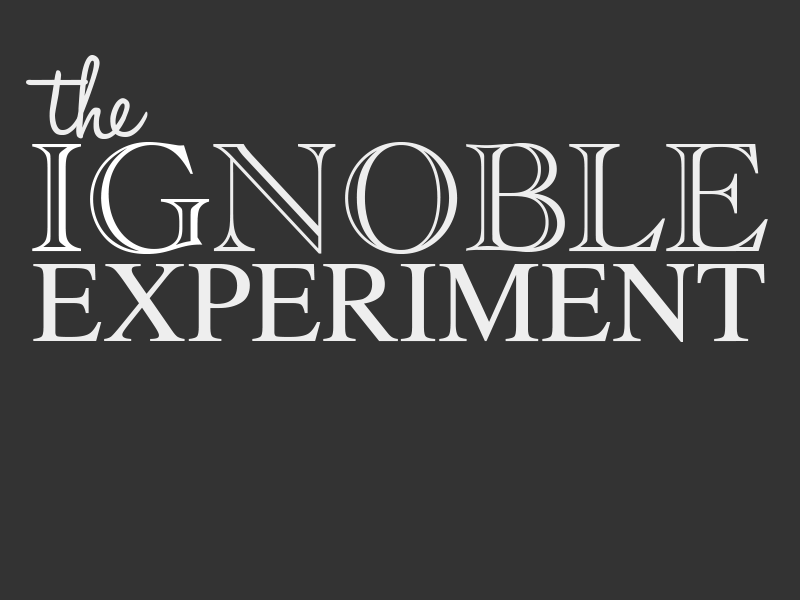
<style>
.page{position:relative;width:800px;height:600px;background:#333333}
.page>*{position:absolute;margin:0}
.t1{font:150px "HaloHandletter";color:#eeeeee}
.t2{font:160px "AcademyEngravedLetPlain";color:#eeeeee}
.t3{font:160px "AcademyEngravedLetPlain";color:#ffffff}
.t4{font:116px "Times-Roman";color:#eeeeee}
</style>
<div class="page">
<p class="t1" style="left:26px;top:55px;width:122px;height:84px">the</p>
<p class="t2" style="left:32px;top:142px;width:736px;height:112px"><span class="t3">IG</span>NOBLE</p>
<p class="t4" style="left:33px;top:264px;width:732px;height:78px">EXPERIMENT</p>
</div>
